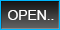
<style>
.page{position:relative;width:60px;height:30px}
.page>*{position:absolute;margin:0}
.t1{font:14px "ArialMT";letter-spacing:-0.01em;color:#ffffff}
</style>
<div class="page">
<p class="t1" style="left:8px;top:10px;width:46px;height:10px">OPEN..</p>
</div>
